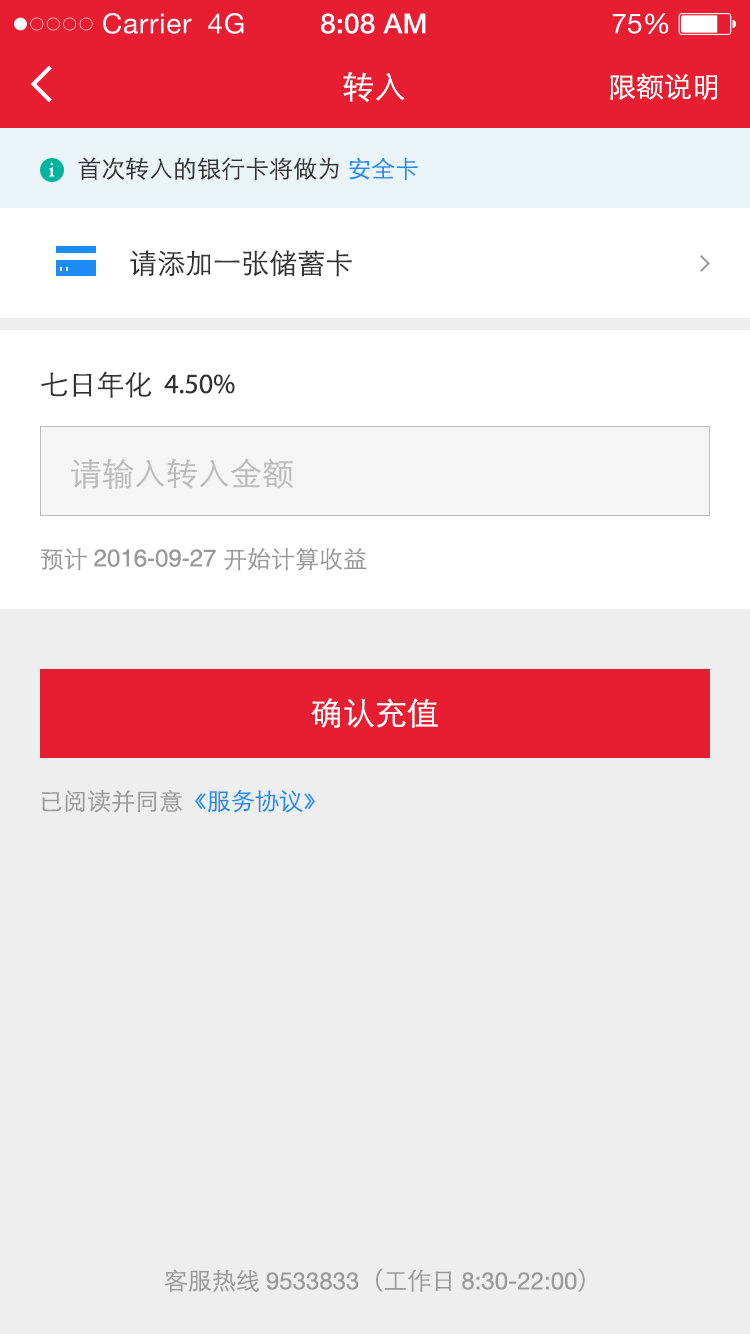
<style>
.page{position:relative;width:750px;height:1334px;background:#eeeeee}
.page>*{position:absolute;margin:0}
.t1{font:32px "STXihei";color:#ffffff}
.t2{font:28px "STXihei";color:#ffffff}
.t3{font:24px "STXihei";color:#333333}
.t4{font:24px "STXihei";color:#1c8bf3}
.t5{font:20px "HoeflerText-Regular";color:#ffffff}
.t6{font:28px "STXihei";color:#333333}
.t7{font:28px "MyriadPro-Regular";color:#333333}
.t8{font:32px "STXihei";color:#bbbbbb}
.t9{font:24px "Helvetica";color:#999999}
.t10{font:24px "STXihei";color:#999999}
.t11{font:24px "HelveticaNeue";color:#999999}
.t12{font:24px "AdobeHeitiStd-Regular";color:#999999}
</style>
<div class="page">
<p class="t1" style="left:343px;top:72px;width:62px;height:30px">转入</p>
<p class="t2" style="left:610px;top:73px;width:107px;height:27px">限额说明</p>
<p class="t3" style="left:78px;top:157px;width:340px;height:23px">首次转入的银行卡将做为 <span class="t4">安全卡</span></p>
<p class="t5" style="left:49px;top:162px;width:6px;height:15px">i</p>
<p class="t6" style="left:130px;top:250px;width:222px;height:27px">请添加一张储蓄卡</p>
<p class="t7" style="left:41px;top:371px;width:194px;height:27px"><span class="t6">七日年化</span>  4.50%</p>
<p class="t8" style="left:71px;top:458px;width:222px;height:31px">请输入转入金额</p>
<p class="t9" style="left:40px;top:547px;width:327px;height:24px"><span class="t10">预计 </span>2016-09-27 <span class="t10">开始计算收益</span></p>
<p class="t1" style="left:311px;top:698px;width:127px;height:30px">确认充值</p>
<p class="t10" style="left:42px;top:789px;width:273px;height:24px">已阅读并同意<span class="t4">《</span><span class="t4">服务协议》</span></p>
<p class="t11" style="left:164px;top:1268px;width:421px;height:24px"><span class="t10">客服热线</span>9533833<span class="t12">（</span><span class="t10">工作日</span>8:30-22:00<span class="t12">）</span></p>
</div>
